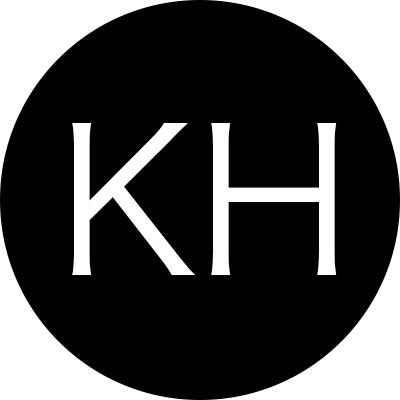
<style>
.page{position:relative;width:400px;height:400px;background:#000000}
.page>*{position:absolute;margin:0}
.t1{font:200px "HiraKakuPro-W3";color:#ffffff}
</style>
<div class="page">
<p class="t1" style="left:72px;top:123px;width:265px;height:152px">KH</p>
</div>
